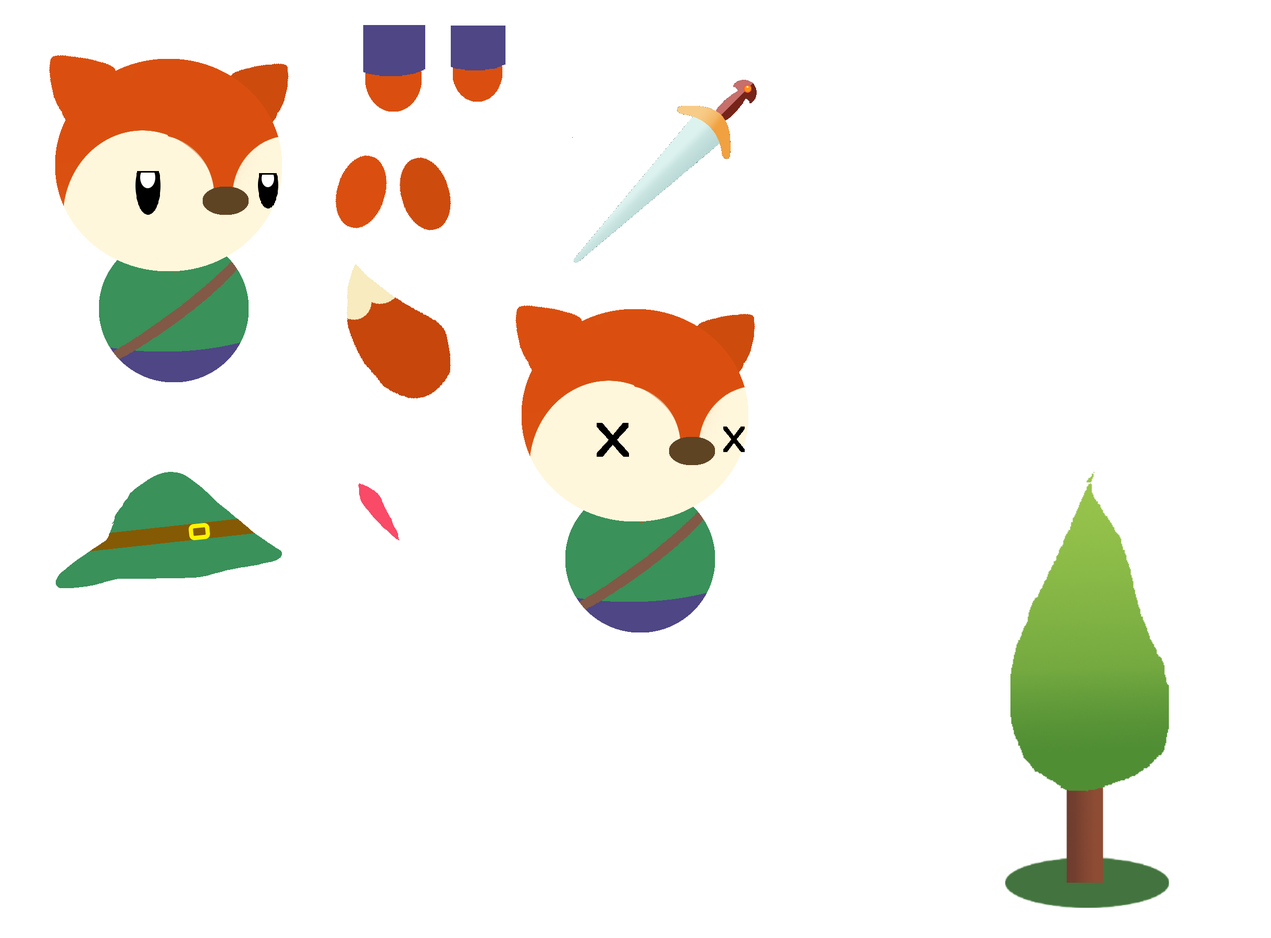
<style>
.page{position:relative;width:1271px;height:938px;background:#ffffff}
.page>*{position:absolute;margin:0}
.t1{font:49.7px "BerlinSansFB-Reg";color:#000000;scale:1.27 1}
.t2{font:37.3px "BerlinSansFB-Reg";color:#000000;scale:1.13 1}
</style>
<div class="page">
<p class="t1" style="left:597px;top:423px;width:32px;height:34px">X</p>
<p class="t2" style="left:724px;top:426px;width:21px;height:26px">X</p>
</div>
